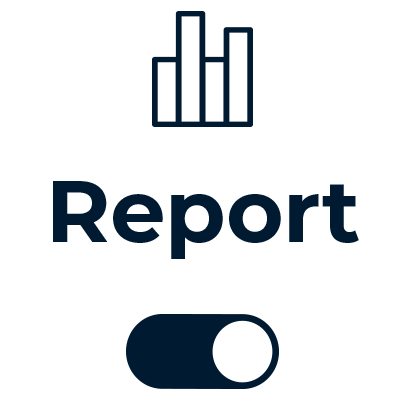
<style>
.page{position:relative;width:400px;height:400px;background:#ffffff}
.page>*{position:absolute;margin:0}
.t1{font:87.8px "Montserrat-Bold";color:#001a31}
</style>
<div class="page">
<p class="t1" style="left:53px;top:181px;width:306px;height:78px">Report</p>
</div>
